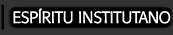
<style>
.page{position:relative;width:173px;height:35px;background:#333333}
.page>*{position:absolute;margin:0}
.t1{font:16px "Formata-Light";letter-spacing:-0.025em;color:#ffffff;font-weight:bold}
.t2{font:24px "Formata-Light";letter-spacing:-0.025em;color:#000000;font-weight:bold}
</style>
<div class="page">
<p class="t1" style="left:1px;top:4px;width:170px;height:26px"><span class="t2">| </span>ESPÍRITU INSTITUTANO</p>
</div>
